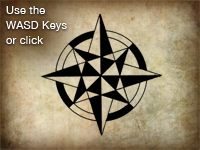
<style>
.page{position:relative;width:200px;height:150px}
.page>*{position:absolute;margin:0}
.t1{font:11px/15px "HelveticaNeue";letter-spacing:0.02em;color:#ffffff}
</style>
<div class="page">
<p class="t1" style="left:6px;top:6px;width:61px;height:38px">Use the<br>WASD Keys<br>or click</p>
</div>
